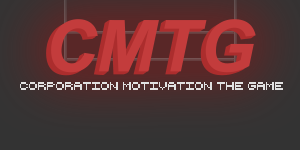
<style>
.page{position:relative;width:300px;height:150px}
.page>*{position:absolute;margin:0}
.t1{font:11px "RetroComputer";color:#e1e1e1}
</style>
<div class="page">
<p class="t1" style="left:20px;top:82px;width:263px;height:8px">CORPORATION MOTIVATION THE GAME</p>
</div>
